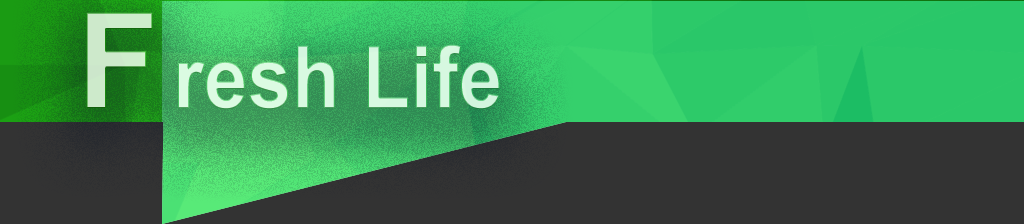
<style>
.page{position:relative;width:1024px;height:224px;background:#333333}
.page>*{position:absolute;margin:0}
.t1{font:132.7px "ArialNarrow-Bold";color:#cde9cb;scale:1.23 1}
.t2{font:86.8px "ArialNarrow-Bold";color:#d8f8e0;scale:1.11 1}
</style>
<div class="page">
<p class="t1" style="left:86px;top:12px;width:67px;height:96px">F</p>
<p class="t2" style="left:178px;top:44px;width:322px;height:66px">resh Life</p>
</div>
